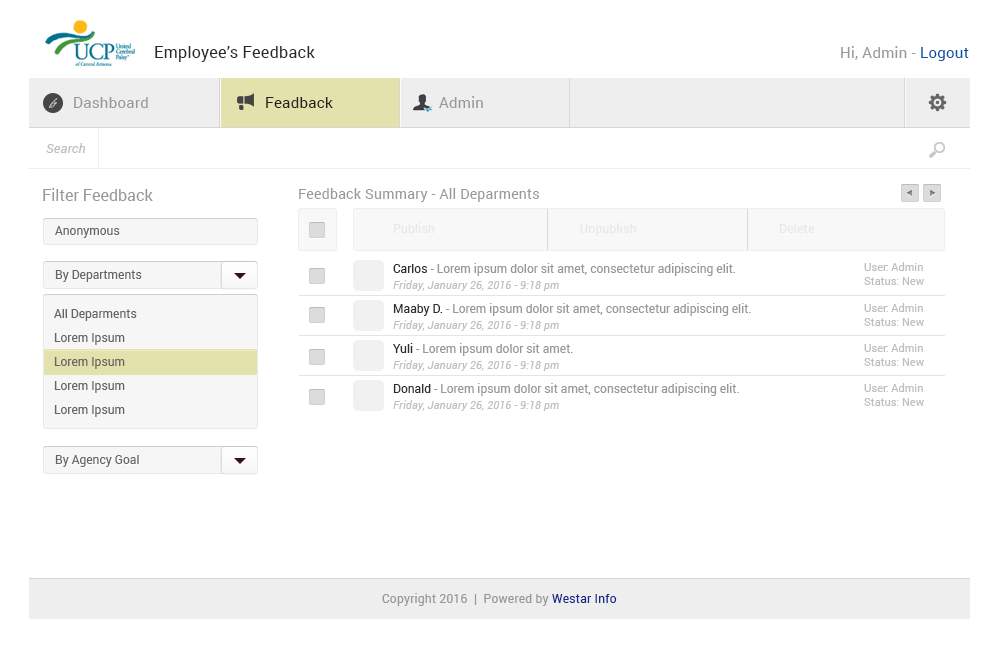
<style>
.page{position:relative;width:1000px;height:664px;background:#ffffff}
.page>*{position:absolute;margin:0}
.t1{font:16px "Roboto-Regular";letter-spacing:0.02em;color:#282828}
.t2{font:15px "Roboto-Regular";letter-spacing:0.02em;color:#989898}
.t3{font:15px "Roboto-Regular";letter-spacing:0.02em;color:#0053a8}
.t4{font:10px "BickhamScriptPro-Regular";letter-spacing:0.02em;color:#bababa}
.t5{font:15px "Roboto-Regular";letter-spacing:0.02em;color:#212121}
.t6{font:13px "Roboto-Italic";letter-spacing:0.02em;color:#bebebe}
.t7{font:16px "Roboto-Regular";color:#989898}
.t8{font:14px "Roboto-Regular";letter-spacing:0.02em;color:#989898}
.t9{font:12px "Roboto-Regular";color:#666666}
.t10{font:12px "Roboto-Regular";letter-spacing:0.02em;color:#e8e8e8}
.t11{font:12px "Roboto-Regular";color:#989898}
.t12{font:12px "Roboto-Regular";color:#2d2d2d}
.t13{font:11px/14px "Roboto-Regular";color:#bebebe}
.t14{font:11px "Roboto-Italic";letter-spacing:0.02em;color:#bebebe}
.t15{font:12px/24px "Roboto-Regular";color:#666666}
.t16{font:12px "Roboto-Regular";letter-spacing:0.02em;color:#989898}
.t17{font:12px "Roboto-Regular";letter-spacing:0.02em;color:#172788}
</style>
<div class="page">
<p class="t1" style="left:155px;top:46px;width:160px;height:16px">Employee’s Feedback</p>
<p class="t2" style="left:841px;top:46px;width:128px;height:15px">Hi, Admin - <span class="t3">Logout</span></p>
<p class="t4" style="left:48px;top:98px;width:10px;height:10px">fg</p>
<p class="t2" style="left:74px;top:97px;width:74px;height:11px">Dashboard</p>
<p class="t5" style="left:266px;top:97px;width:67px;height:11px">Feadback</p>
<p class="t2" style="left:439px;top:96px;width:44px;height:12px">Admin</p>
<p class="t6" style="left:46px;top:143px;width:40px;height:10px">Search</p>
<p class="t7" style="left:43px;top:188px;width:110px;height:13px">Filter Feedback</p>
<p class="t8" style="left:299px;top:188px;width:240px;height:14px">Feedback Summary - All Deparments</p>
<p class="t9" style="left:55px;top:226px;width:65px;height:12px">Anonymous</p>
<p class="t10" style="left:393px;top:223px;width:42px;height:10px">Publish</p>
<p class="t10" style="left:580px;top:223px;width:56px;height:13px">Unpublish</p>
<p class="t10" style="left:779px;top:224px;width:35px;height:9px">Delete</p>
<p class="t9" style="left:55px;top:270px;width:87px;height:12px">By Departments</p>
<p class="t11" style="left:393px;top:263px;width:342px;height:13px"><span class="t12">Carlos</span> - Lorem ipsum dolor sit amet, consectetur adipiscing elit.</p>
<p class="t13" style="left:864px;top:262px;width:60px;height:23px">User: Admin<br>Status: New</p>
<p class="t14" style="left:393px;top:280px;width:166px;height:11px">Friday, January 26, 2016 - 9:18 pm</p>
<p class="t11" style="left:393px;top:303px;width:358px;height:13px"><span class="t12">Maaby D.</span> - Lorem ipsum dolor sit amet, consectetur adipiscing elit.</p>
<p class="t13" style="left:864px;top:303px;width:60px;height:23px">User: Admin<br>Status: New</p>
<p class="t15" style="left:54px;top:309px;width:83px;height:108px">All Deparments<br>Lorem Ipsum<br>Lorem Ipsum<br>Lorem Ipsum<br>Lorem Ipsum</p>
<p class="t14" style="left:393px;top:320px;width:166px;height:11px">Friday, January 26, 2016 - 9:18 pm</p>
<p class="t11" style="left:393px;top:343px;width:180px;height:13px"><span class="t12">Yuli</span> - Lorem ipsum dolor sit amet.</p>
<p class="t13" style="left:864px;top:343px;width:60px;height:23px">User: Admin<br>Status: New</p>
<p class="t14" style="left:393px;top:360px;width:166px;height:11px">Friday, January 26, 2016 - 9:18 pm</p>
<p class="t11" style="left:393px;top:383px;width:346px;height:13px"><span class="t12">Donald</span> - Lorem ipsum dolor sit amet, consectetur adipiscing elit.</p>
<p class="t13" style="left:864px;top:383px;width:60px;height:23px">User: Admin<br>Status: New</p>
<p class="t14" style="left:393px;top:400px;width:166px;height:11px">Friday, January 26, 2016 - 9:18 pm</p>
<p class="t9" style="left:55px;top:455px;width:84px;height:12px">By Agency Goal</p>
<p class="t16" style="left:382px;top:593px;width:235px;height:13px">Copyright 2016  |  Powered by <span class="t17">Westar Info</span></p>
</div>
